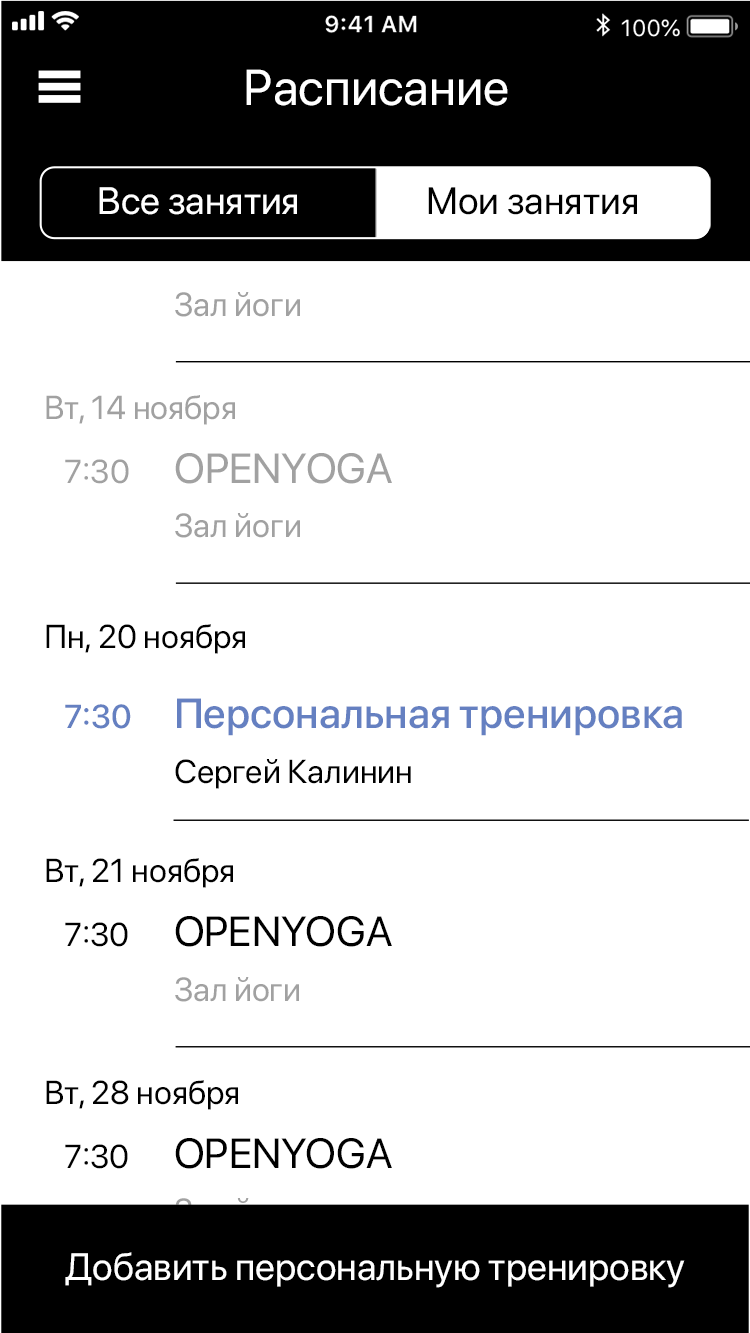
<style>
.page{position:relative;width:750px;height:1333px;background:#ffffff}
.page>*{position:absolute;margin:0}
.t1{font:50px "SFProDisplay-Regular";color:#ffffff}
.t2{font:38px "SFProDisplay-Regular";color:#ffffff}
.t3{font:38px "SFProDisplay-Regular";color:#000000}
.t4{font:33px "SFProDisplay-Regular";color:#a1a1a1}
.t5{font:42px "SFProDisplay-Regular";color:#a1a1a1}
.t6{font:33px "SFProDisplay-Regular";color:#000000}
.t7{font:42px "SFProDisplay-Medium";color:#6580c1}
.t8{font:33px "SFProDisplay-Medium";color:#6580c1}
.t9{font:42px "SFProDisplay-Regular";color:#000000}
</style>
<div class="page">
<p class="t1" style="left:246px;top:69px;width:262px;height:37px">Расписание</p>
<p class="t2" style="left:99px;top:187px;width:198px;height:28px">Все занятия</p>
<p class="t3" style="left:428px;top:187px;width:209px;height:28px">Мои занятия</p>
<p class="t4" style="left:175px;top:292px;width:125px;height:25px">Зал йоги</p>
<p class="t4" style="left:46px;top:395px;width:189px;height:30px">Вт, 14 ноября</p>
<p class="t4" style="left:65px;top:459px;width:64px;height:25px">7:30</p>
<p class="t5" style="left:175px;top:453px;width:217px;height:31px">OPENYOGA</p>
<p class="t4" style="left:175px;top:513px;width:125px;height:25px">Зал йоги</p>
<p class="t6" style="left:46px;top:624px;width:199px;height:30px">Пн, 20 ноября</p>
<p class="t7" style="left:177px;top:698px;width:505px;height:38px">Персональная тренировка</p>
<p class="t8" style="left:65px;top:704px;width:66px;height:25px">7:30</p>
<p class="t6" style="left:175px;top:759px;width:236px;height:30px">Сергей Калинин</p>
<p class="t6" style="left:46px;top:858px;width:187px;height:30px">Вт, 21 ноября</p>
<p class="t9" style="left:175px;top:916px;width:217px;height:31px">OPENYOGA</p>
<p class="t6" style="left:65px;top:922px;width:63px;height:25px">7:30</p>
<p class="t4" style="left:175px;top:977px;width:124px;height:25px">Зал йоги</p>
<p class="t6" style="left:46px;top:1080px;width:192px;height:30px">Вт, 28 ноября</p>
<p class="t6" style="left:65px;top:1144px;width:63px;height:25px">7:30</p>
<p class="t9" style="left:175px;top:1138px;width:217px;height:31px">OPENYOGA</p>
<p class="t2" style="left:65px;top:1252px;width:620px;height:36px">Добавить персональную тренировку</p>
</div>
